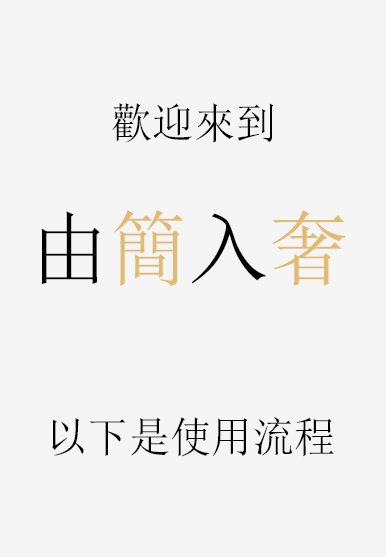
<style>
.page{position:relative;width:386px;height:557px;background:#f5f5f5}
.page>*{position:absolute;margin:0}
.t1{font:42.6px "NSimSun";color:#000000;font-variant:small-caps}
.t2{font:82.4px "NSimSun";color:#000000;font-variant:small-caps}
.t3{font:82.4px "NSimSun";color:#e3ba73;font-variant:small-caps}
</style>
<div class="page">
<p class="t1" style="left:112px;top:103px;width:162px;height:40px">歡迎來到</p>
<p class="t2" style="left:41px;top:210px;width:305px;height:76px">由<span class="t3">簡</span>入<span class="t3">奢</span></p>
<p class="t1" style="left:52px;top:417px;width:282px;height:40px">以下是使用流程</p>
</div>
